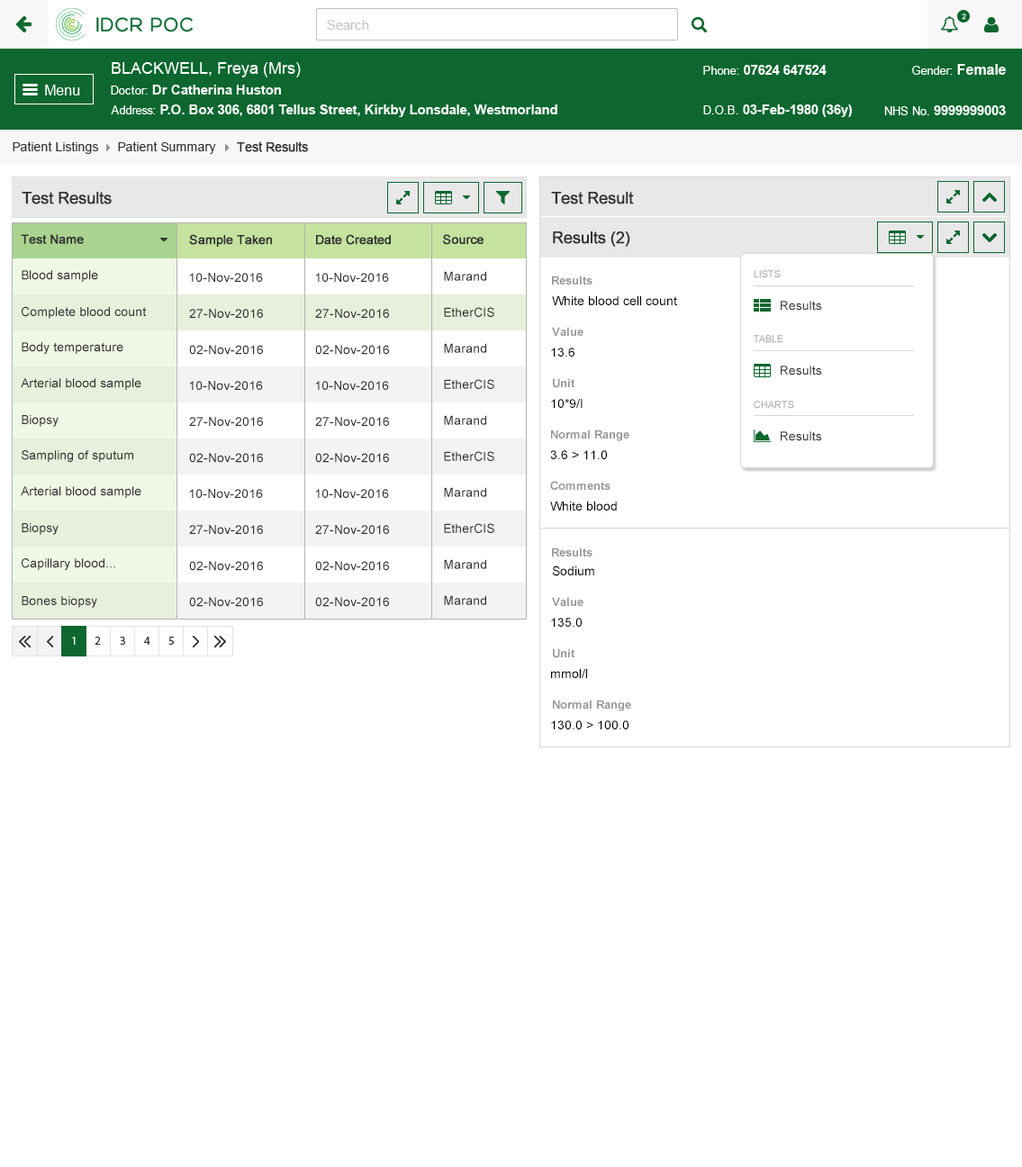
<style>
.page{position:relative;width:1022px;height:1167px;background:#ffffff}
.page>*{position:absolute;margin:0}
.t1{font:12.6px "ArialMT";color:#313131}
.t2{font:12.6px "ArialMT";color:#313131;font-weight:bold}
.t3{font:16.2px "ArialMT";color:#303030;font-weight:bold}
.t4{font:12.6px "ArialMT";color:#303030;font-weight:bold}
.t5{font:12.6px "ArialMT";color:#303030}
.t6{font:11.7px "Arial-BoldMT";color:#959595}
.t7{font:9.9px "ArialMT";color:#a3a3a3}
.t8{font:12.6px "ArialMT";color:#000000}
.t9{font:12.6px "ArialMT";color:#3c3c3c}
</style>
<div class="page">
<p class="t1" style="left:13px;top:141px;width:86px;height:13px">Patient Listings</p>
<p class="t1" style="left:118px;top:141px;width:98px;height:13px">Patient Summary</p>
<p class="t2" style="left:237px;top:141px;width:71px;height:11px">Test Results</p>
<p class="t3" style="left:22px;top:192px;width:90px;height:12px">Test Results</p>
<p class="t3" style="left:551px;top:192px;width:83px;height:12px">Test Result</p>
<p class="t3" style="left:553px;top:231px;width:77px;height:16px">Results (2)</p>
<p class="t4" style="left:21px;top:234px;width:63px;height:10px">Test Name</p>
<p class="t4" style="left:189px;top:234px;width:83px;height:13px">Sample Taken</p>
<p class="t4" style="left:316px;top:234px;width:75px;height:11px">Date Created</p>
<p class="t4" style="left:443px;top:234px;width:40px;height:11px">Source</p>
<p class="t5" style="left:22px;top:270px;width:76px;height:12px">Blood sample</p>
<p class="t5" style="left:189px;top:273px;width:74px;height:9px">10-Nov-2016</p>
<p class="t5" style="left:315px;top:273px;width:74px;height:9px">10-Nov-2016</p>
<p class="t5" style="left:444px;top:271px;width:42px;height:10px">Marand</p>
<p class="t6" style="left:552px;top:276px;width:40px;height:9px">Results</p>
<p class="t7" style="left:754px;top:270px;width:27px;height:8px">LISTS</p>
<p class="t8" style="left:552px;top:296px;width:125px;height:9px">White blood cell count</p>
<p class="t9" style="left:781px;top:301px;width:41px;height:10px">Results</p>
<p class="t5" style="left:22px;top:306px;width:125px;height:13px">Complete blood count</p>
<p class="t5" style="left:189px;top:309px;width:74px;height:9px">27-Nov-2016</p>
<p class="t5" style="left:315px;top:309px;width:74px;height:9px">27-Nov-2016</p>
<p class="t5" style="left:444px;top:307px;width:50px;height:10px">EtherCIS</p>
<p class="t6" style="left:552px;top:327px;width:31px;height:9px">Value</p>
<p class="t7" style="left:754px;top:335px;width:29px;height:8px">TABLE</p>
<p class="t5" style="left:22px;top:342px;width:101px;height:12px">Body temperature</p>
<p class="t5" style="left:189px;top:345px;width:74px;height:10px">02-Nov-2016</p>
<p class="t5" style="left:315px;top:345px;width:74px;height:10px">02-Nov-2016</p>
<p class="t5" style="left:444px;top:343px;width:42px;height:10px">Marand</p>
<p class="t8" style="left:551px;top:348px;width:23px;height:9px">13.6</p>
<p class="t9" style="left:781px;top:366px;width:41px;height:9px">Results</p>
<p class="t5" style="left:21px;top:378px;width:120px;height:12px">Arterial blood sample</p>
<p class="t5" style="left:189px;top:381px;width:74px;height:9px">10-Nov-2016</p>
<p class="t5" style="left:315px;top:381px;width:74px;height:9px">10-Nov-2016</p>
<p class="t5" style="left:444px;top:379px;width:50px;height:10px">EtherCIS</p>
<p class="t6" style="left:553px;top:378px;width:22px;height:10px">Unit</p>
<p class="t8" style="left:551px;top:399px;width:32px;height:9px">10*9/I</p>
<p class="t7" style="left:754px;top:401px;width:40px;height:8px">CHARTS</p>
<p class="t5" style="left:22px;top:415px;width:37px;height:12px">Biopsy</p>
<p class="t5" style="left:189px;top:417px;width:74px;height:9px">27-Nov-2016</p>
<p class="t5" style="left:315px;top:417px;width:74px;height:9px">27-Nov-2016</p>
<p class="t5" style="left:444px;top:415px;width:42px;height:10px">Marand</p>
<p class="t6" style="left:551px;top:429px;width:78px;height:12px">Normal Range</p>
<p class="t9" style="left:781px;top:431px;width:41px;height:10px">Results</p>
<p class="t5" style="left:22px;top:450px;width:111px;height:12px">Sampling of sputum</p>
<p class="t5" style="left:189px;top:453px;width:74px;height:10px">02-Nov-2016</p>
<p class="t5" style="left:315px;top:453px;width:74px;height:10px">02-Nov-2016</p>
<p class="t5" style="left:444px;top:451px;width:50px;height:10px">EtherCIS</p>
<p class="t8" style="left:550px;top:450px;width:57px;height:9px">3.6 &gt; 11.0</p>
<p class="t6" style="left:550px;top:481px;width:60px;height:9px">Comments</p>
<p class="t5" style="left:21px;top:486px;width:120px;height:12px">Arterial blood sample</p>
<p class="t5" style="left:189px;top:489px;width:74px;height:9px">10-Nov-2016</p>
<p class="t5" style="left:315px;top:489px;width:74px;height:9px">10-Nov-2016</p>
<p class="t5" style="left:444px;top:487px;width:42px;height:10px">Marand</p>
<p class="t8" style="left:550px;top:502px;width:67px;height:9px">White blood</p>
<p class="t5" style="left:22px;top:523px;width:37px;height:12px">Biopsy</p>
<p class="t5" style="left:189px;top:525px;width:74px;height:9px">27-Nov-2016</p>
<p class="t5" style="left:315px;top:525px;width:74px;height:9px">27-Nov-2016</p>
<p class="t5" style="left:444px;top:523px;width:50px;height:10px">EtherCIS</p>
<p class="t6" style="left:552px;top:547px;width:40px;height:9px">Results</p>
<p class="t5" style="left:22px;top:558px;width:93px;height:12px">Capillary blood...</p>
<p class="t5" style="left:189px;top:561px;width:74px;height:10px">02-Nov-2016</p>
<p class="t5" style="left:315px;top:561px;width:74px;height:10px">02-Nov-2016</p>
<p class="t5" style="left:444px;top:559px;width:42px;height:10px">Marand</p>
<p class="t8" style="left:552px;top:565px;width:42px;height:11px">Sodium</p>
<p class="t5" style="left:22px;top:596px;width:75px;height:12px">Bones biopsy</p>
<p class="t5" style="left:189px;top:597px;width:74px;height:10px">02-Nov-2016</p>
<p class="t5" style="left:315px;top:597px;width:74px;height:10px">02-Nov-2016</p>
<p class="t5" style="left:444px;top:595px;width:42px;height:10px">Marand</p>
<p class="t6" style="left:552px;top:597px;width:31px;height:9px">Value</p>
<p class="t8" style="left:551px;top:618px;width:31px;height:9px">135.0</p>
<p class="t6" style="left:553px;top:648px;width:22px;height:10px">Unit</p>
<p class="t8" style="left:551px;top:669px;width:36px;height:9px">mmol/l</p>
<p class="t6" style="left:553px;top:700px;width:78px;height:11px">Normal Range</p>
<p class="t8" style="left:551px;top:720px;width:77px;height:9px">130.0 &gt; 100.0</p>
</div>
